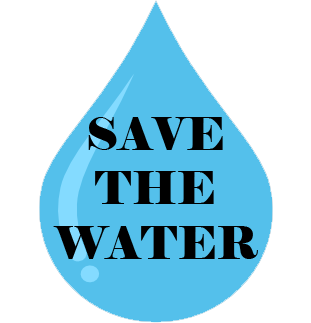
<style>
.page{position:relative;width:311px;height:323px;background:#ffffff}
.page>*{position:absolute;margin:0}
.t1{font:45.4px "Elephant-Regular";color:#000000}
</style>
<div class="page">
<p class="t1" style="left:53px;top:117px;width:205px;height:142px;text-align:center">SAVE<br>THE<br>WATER</p>
</div>
